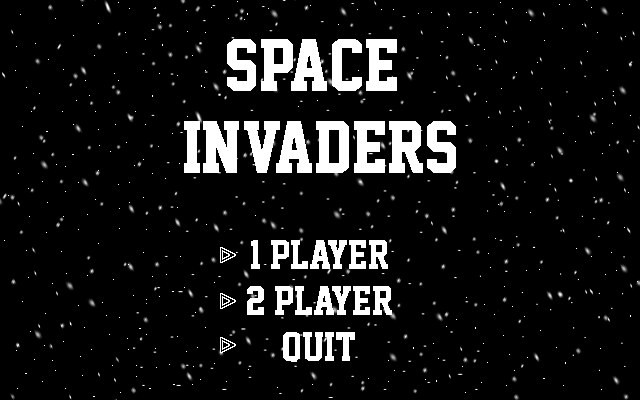
<style>
.page{position:relative;width:640px;height:400px;background:#000000}
.page>*{position:absolute;margin:0}
.t1{font:68px "SuperstarM54";color:#ffffff}
.t2{font:38px "SuperstarM54";color:#ffffff}
</style>
<div class="page">
<p class="t1" style="left:184px;top:39px;width:272px;height:134px;text-align:center">SPACE<br> INVADERS</p>
<p class="t2" style="left:247px;top:240px;width:145px;height:122px;text-align:center">1 player<br>2 player<br>quit</p>
</div>
